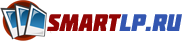
<style>
.page{position:relative;width:182px;height:41px;background:#ffffff}
.page>*{position:absolute;margin:0}
.t1{font:24px "Molot";color:#920505;font-style:italic}
.t2{font:24px "Molot";color:#3356b1;font-style:italic}
</style>
<div class="page">
<p class="t1" style="left:47px;top:14px;width:135px;height:17px">smart<span class="t2">lp.ru</span></p>
</div>
